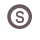
<style>
.page{position:relative;width:40px;height:40px;background:#ffffff}
.page>*{position:absolute;margin:0}
.t1{font:14px "HiraKakuPro-W6";color:#69595c}
</style>
<div class="page">
<p class="t1" style="left:15px;top:11px;width:9px;height:12px">S</p>
</div>
